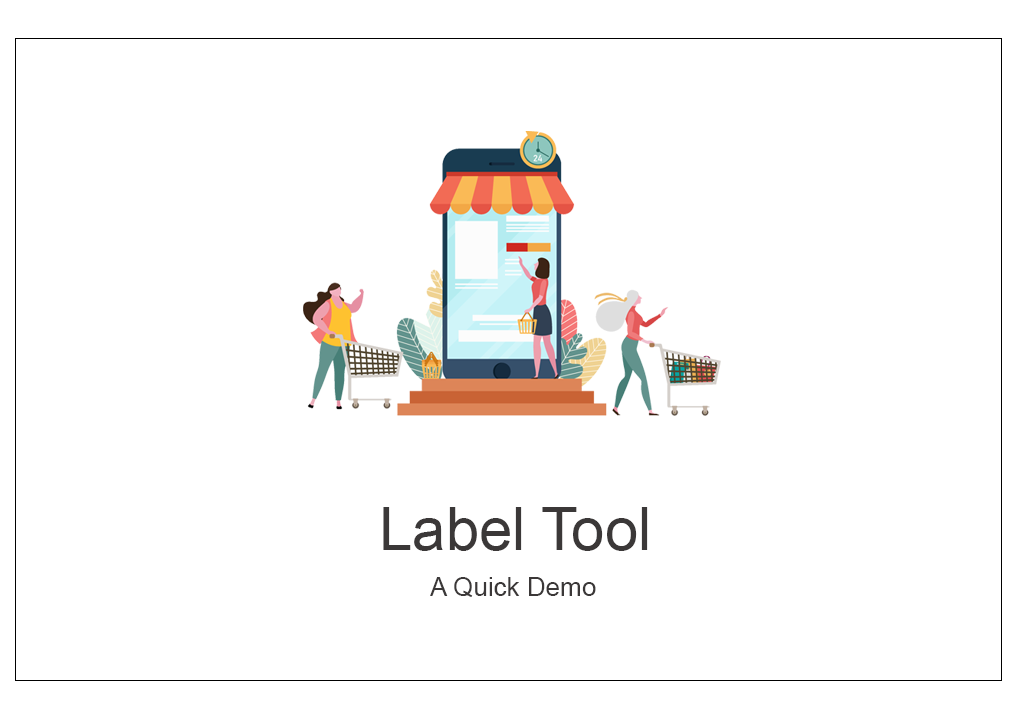
<style>
.page{position:relative;width:1024px;height:720px;background:#ffffff}
.page>*{position:absolute;margin:0}
.t1{font:60px "ArialMT";color:#3b3838}
.t2{font:26px "ArialMT";color:#3b3838}
</style>
<div class="page">
<p class="t1" style="left:383px;top:507px;width:265px;height:44px">Label Tool</p>
<p class="t2" style="left:430px;top:577px;width:166px;height:20px">A Quick Demo</p>
</div>
